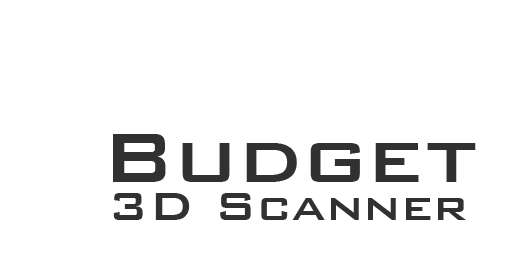
<style>
.page{position:relative;width:512px;height:256px;background:#ffffff}
.page>*{position:absolute;margin:0}
.t1{font:93px "BankGothicBT-Medium";color:#313131}
.t2{font:53px "BankGothicBT-Medium";color:#313131}
</style>
<div class="page">
<p class="t1" style="left:113px;top:134px;width:363px;height:48px">Budget</p>
<p class="t2" style="left:113px;top:193px;width:353px;height:27px">3D Scanner</p>
</div>
